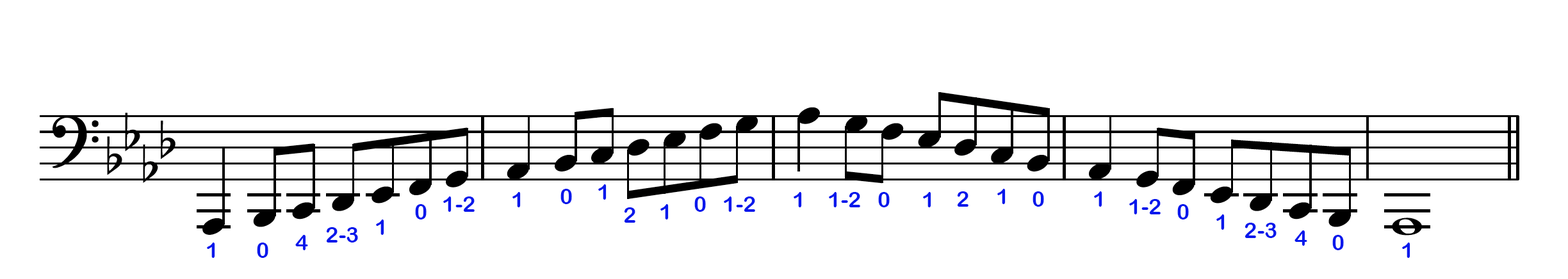
<style>
.page{position:relative;width:1568px;height:279px;background:#ffffff}
.page>*{position:absolute;margin:0}
.t1{font:21.8px "ArialRoundedMTBold";color:#0417ec}
</style>
<div class="page">
<p class="t1" style="left:598px;top:184px;width:9px;height:16px">1</p>
<p class="t1" style="left:443px;top:197px;width:32px;height:15px">1-2</p>
<p class="t1" style="left:512px;top:192px;width:9px;height:16px">1</p>
<p class="t1" style="left:560px;top:189px;width:12px;height:15px">0</p>
<p class="t1" style="left:694px;top:197px;width:12px;height:15px">0</p>
<p class="t1" style="left:724px;top:197px;width:31px;height:15px">1-2</p>
<p class="t1" style="left:794px;top:192px;width:8px;height:16px">1</p>
<p class="t1" style="left:829px;top:192px;width:31px;height:16px">1-2</p>
<p class="t1" style="left:878px;top:192px;width:12px;height:16px">0</p>
<p class="t1" style="left:923px;top:192px;width:8px;height:16px">1</p>
<p class="t1" style="left:957px;top:192px;width:11px;height:15px">2</p>
<p class="t1" style="left:997px;top:189px;width:9px;height:15px">1</p>
<p class="t1" style="left:1033px;top:192px;width:11px;height:15px">0</p>
<p class="t1" style="left:1094px;top:192px;width:8px;height:15px">1</p>
<p class="t1" style="left:415px;top:204px;width:12px;height:16px">0</p>
<p class="t1" style="left:624px;top:208px;width:11px;height:15px">2</p>
<p class="t1" style="left:660px;top:204px;width:9px;height:16px">1</p>
<p class="t1" style="left:1129px;top:199px;width:32px;height:16px">1-2</p>
<p class="t1" style="left:1177px;top:204px;width:12px;height:16px">0</p>
<p class="t1" style="left:376px;top:220px;width:8px;height:15px">1</p>
<p class="t1" style="left:1216px;top:215px;width:9px;height:15px">1</p>
<p class="t1" style="left:326px;top:227px;width:32px;height:16px">2-3</p>
<p class="t1" style="left:1245px;top:223px;width:32px;height:15px">2-3</p>
<p class="t1" style="left:1294px;top:231px;width:13px;height:15px">4</p>
<p class="t1" style="left:207px;top:243px;width:8px;height:15px">1</p>
<p class="t1" style="left:257px;top:243px;width:11px;height:15px">0</p>
<p class="t1" style="left:295px;top:235px;width:13px;height:15px">4</p>
<p class="t1" style="left:1332px;top:235px;width:12px;height:15px">0</p>
<p class="t1" style="left:1402px;top:243px;width:8px;height:15px">1</p>
</div>
